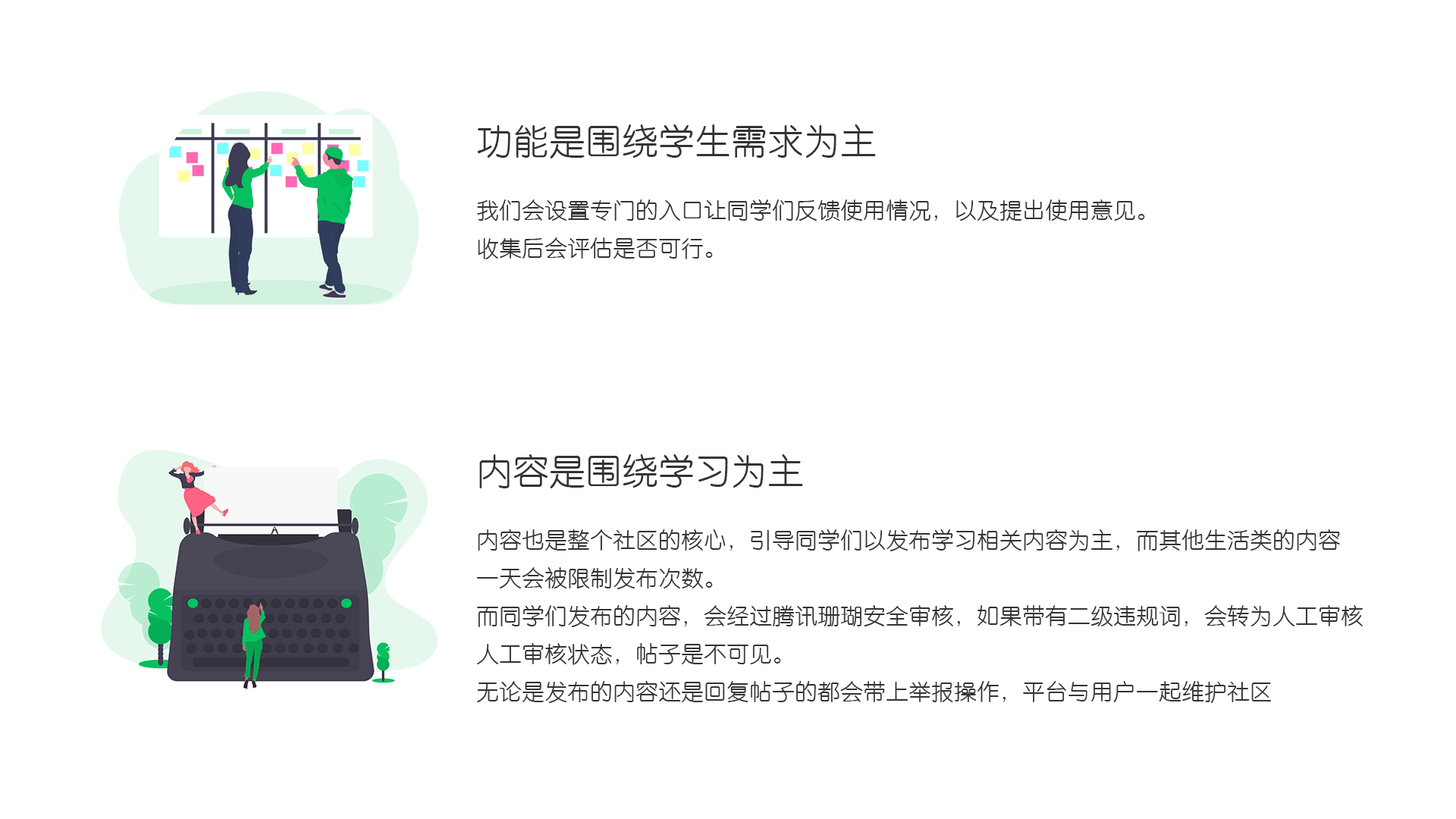
<style>
.page{position:relative;width:1456px;height:819px;background:#ffffff}
.page>*{position:absolute;margin:0}
.t1{font:22.7px/37.9px "Tensentype-JiaLiXiYuanJ";color:#333333}
.t2{font:36.4px/37.9px "Tensentype-JiaLiXiYuanJ";color:#333333}
</style>
<div class="page">
<p class="t1" style="left:477px;top:124px;width:668px;height:135px"><span class="t2">功能是围绕学生需求为主<br><br></span>我们会设置专门的入口让同学们反馈使用情况，以及提出使用意见。<br>收集后会评估是否可行。</p>
<p class="t1" style="left:476px;top:454px;width:887px;height:249px"><span class="t2">内容是围绕学习为主<br><br></span>内容也是整个社区的核心，引导同学们以发布学习相关内容为主，而其他生活类的内容<br>一天会被限制发布次数。<br>而同学们发布的内容，会经过腾讯珊瑚安全审核，如果带有二级违规词，会转为人工审核<br>人工审核状态，帖子是不可见。<br>无论是发布的内容还是回复帖子的都会带上举报操作，平台与用户一起维护社区</p>
</div>
